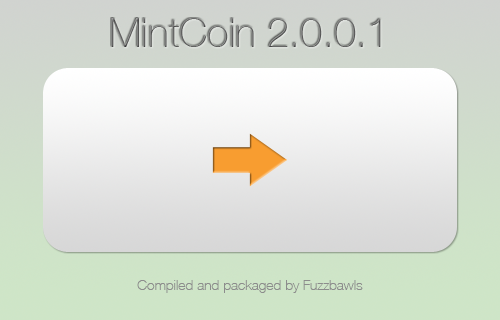
<style>
.page{position:relative;width:500px;height:320px}
.page>*{position:absolute;margin:0}
.t1{font:40px "HelveticaNeue-Thin";color:#666666}
.t2{font:14px "HelveticaNeue-Thin";color:#8c8c8c}
</style>
<div class="page">
<p class="t1" style="left:111px;top:18px;width:270px;height:29px">MintCoin 2.0.0.1</p>
<p class="t2" style="left:137px;top:280px;width:226px;height:13px">Compiled and packaged by Fuzzbawls</p>
</div>
